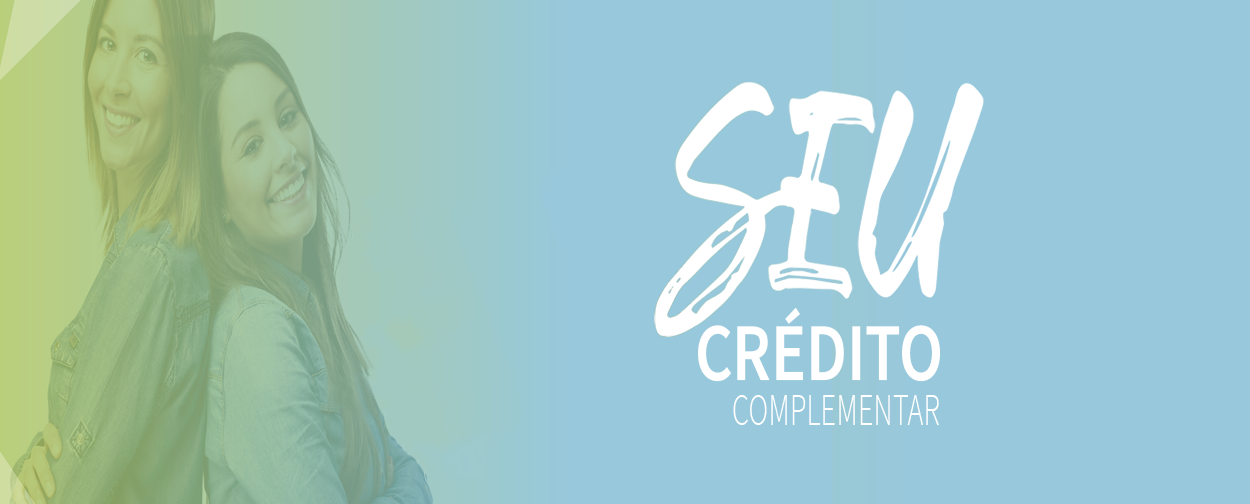
<style>
.page{position:relative;width:1250px;height:504px;background:#97c8dc}
.page>*{position:absolute;margin:0}
.t1{font:81.9px "SourceSansRoman-Semibold";color:#ffffff;scale:0.8 1}
.t2{font:45px "SourceSansPro-Light";color:#ffffff;scale:0.68 1}
</style>
<div class="page">
<p class="t1" style="left:698px;top:307px;width:243px;height:75px">CRÉDITO</p>
<p class="t2" style="left:733px;top:395px;width:206px;height:30px">COMPLEMENTAR</p>
</div>
